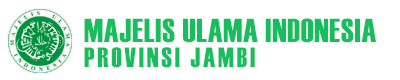
<style>
.page{position:relative;width:400px;height:80px;background:#ffffff}
.page>*{position:absolute;margin:0}
.t1{font:33.3px/25px "Haettenschweiler";letter-spacing:0.025em;color:#16be5e}
.t2{font:27.8px/25px "Haettenschweiler";letter-spacing:0.1em;color:#16be5e}
</style>
<div class="page">
<p class="t1" style="left:84px;top:18px;width:292px;height:50px;text-align:right">MAJELIS ULAMA INDONESIA<br><span class="t2">PROVINSI JAMBI</span></p>
</div>
